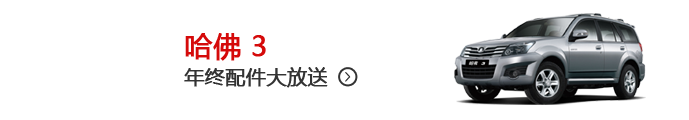
<style>
.page{position:relative;width:689px;height:120px;background:#ffffff}
.page>*{position:absolute;margin:0}
.t1{font:20px/35px "MicrosoftYaHei";color:#333333;font-weight:bold}
.t2{font:28px/35px "MicrosoftYaHei";color:#d50a0a;font-weight:bold}
.t3{font:12px "YouYuan";color:#333333;font-weight:bold}
</style>
<div class="page">
<p class="t1" style="left:184px;top:33px;width:144px;height:55px"><span class="t2">哈佛 3<br></span>年终配件大放送</p>
<p class="t3" style="left:345px;top:72px;width:6px;height:10px">&gt;</p>
</div>
